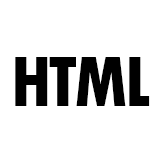
<style>
.page{position:relative;width:162px;height:161px;background:#ffffff}
.page>*{position:absolute;margin:0}
.t1{font:75px "TwCenMT-CondensedExtraBold";letter-spacing:-0.059em;color:#000000}
</style>
<div class="page">
<p class="t1" style="left:15px;top:57px;width:135px;height:49px">HTML</p>
</div>
